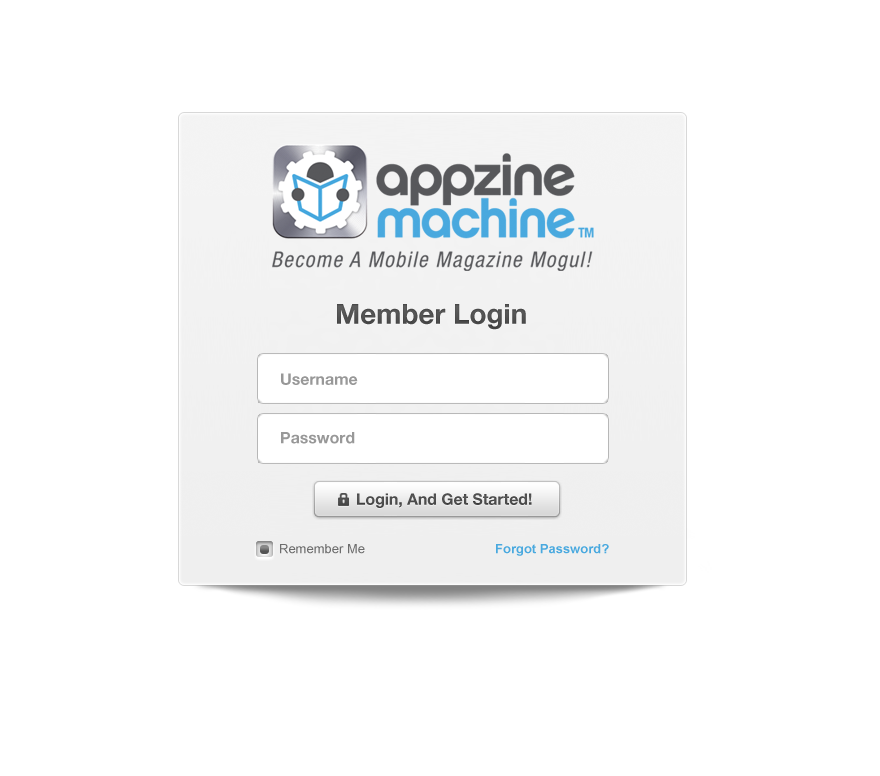
<style>
.page{position:relative;width:880px;height:776px;background:#ffffff}
.page>*{position:absolute;margin:0}
.t1{font:27.8px "HelveticaNeueLTStd-Bd";color:#4f4f4f}
.t2{font:15.8px/58.5px "HelveticaNeueLTStd-Bd";color:#989898}
.t3{font:13px "ArialMT";color:#6d6d6d}
.t4{font:13px "Arial-BoldMT";color:#49a9df}
</style>
<div class="page">
<p class="t1" style="left:337px;top:304px;width:189px;height:26px">Member Login</p>
<p class="t2" style="left:281px;top:373px;width:77px;height:71px">Username<br>Password</p>
<p class="t3" style="left:280px;top:544px;width:85px;height:10px">Remember Me</p>
<p class="t4" style="left:496px;top:544px;width:113px;height:12px">Forgot Password?</p>
</div>
